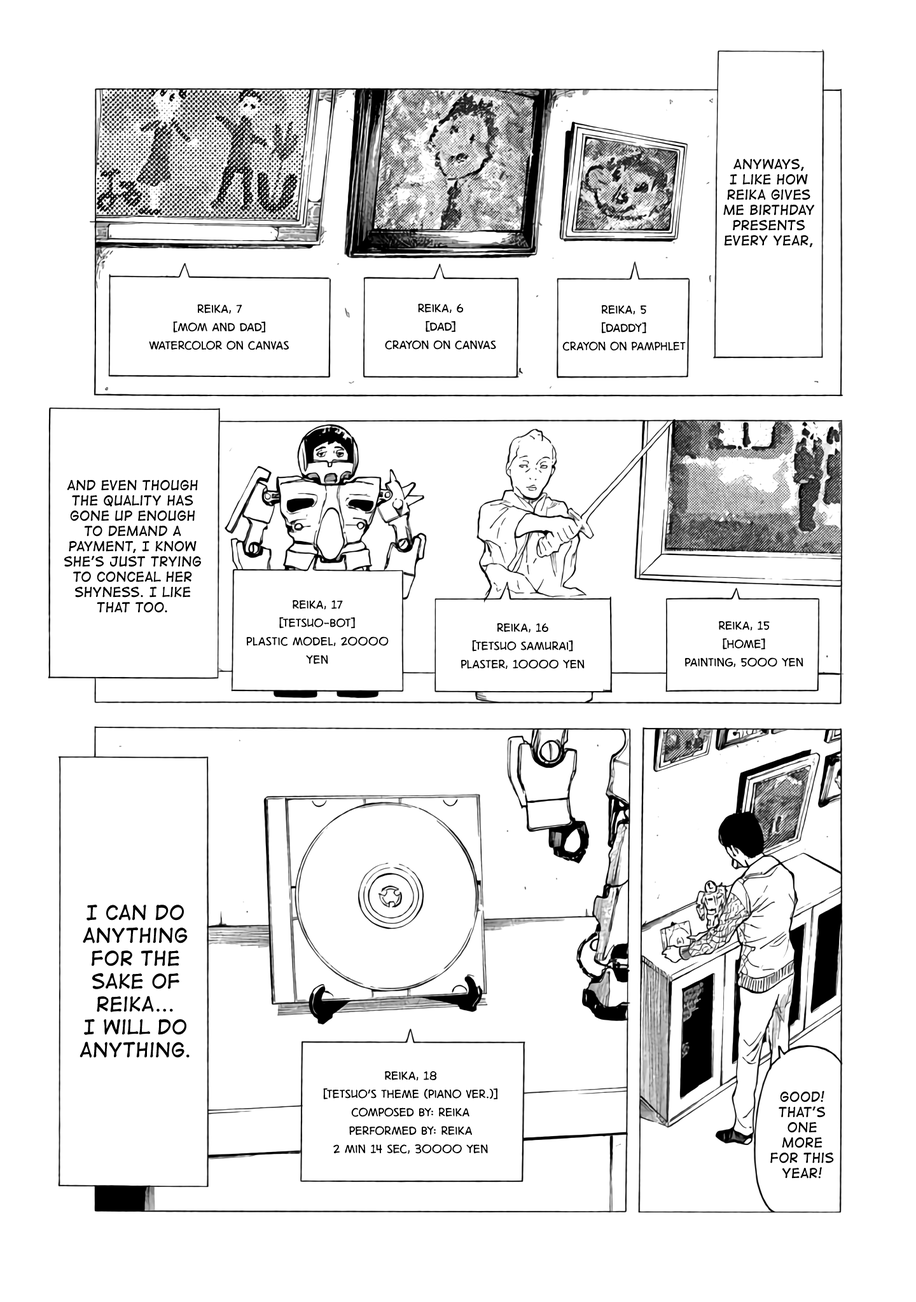
<style>
.page{position:relative;width:916px;height:1302px;background:#ffffff}
.page>*{position:absolute;margin:0}
.t1{font:12.7px "DigitalStrip";color:#000000}
.t2{font:15.3px "DigitalStrip.BB";color:#000000}
.t3{font:19.1px "DigitalStrip";color:#000000}
</style>
<div class="page">
<p class="t1" style="left:723px;top:159px;width:92px;height:88px;text-align:center">Anyways, I like how Reika gives me birthday presents every year,</p>
<p class="t2" style="left:149px;top:304px;width:140px;height:46px;text-align:center">Reika, 7<br>[Mom and Dad]<br>Watercolor on canvas</p>
<p class="t2" style="left:385px;top:303px;width:111px;height:47px;text-align:center">Reika, 6<br>[Dad]<br>Crayon on Canvas</p>
<p class="t2" style="left:562px;top:305px;width:123px;height:46px;text-align:center">Reika, 5<br>[Daddy]<br>Crayon on pamphlet</p>
<p class="t1" style="left:64px;top:480px;width:137px;height:133px;text-align:center">and even though the quality has gone up enough to demand a payment, I know she’s just trying to conceal her shyness. I like that too.</p>
<p class="t2" style="left:246px;top:600px;width:143px;height:64px;text-align:center">Reika, 17<br>[tetsuo-bot]<br>plastic Model, 20000 Yen</p>
<p class="t2" style="left:461px;top:623px;width:123px;height:47px;text-align:center">Reika, 16<br>[Tetsuo Samurai]<br>Plaster, 10000 Yen</p>
<p class="t2" style="left:685px;top:621px;width:118px;height:47px;text-align:center">Reika, 15<br>[Home]<br>Painting, 5000 Yen</p>
<p class="t3" style="left:79px;top:904px;width:110px;height:154px;text-align:center">I can do anything for the sake of reika... <br>I will do anything.</p>
<p class="t2" style="left:323px;top:1071px;width:175px;height:83px;text-align:center">Reika, 18<br>[Tetsuo’s Theme (Piano Ver.)]<br>Composed by: Reika<br>Performed by: Reika<br>2 min 14 sec, 30000 Yen</p>
<p class="t1" style="left:770px;top:1091px;width:64px;height:88px;text-align:center">Good! That’s one more for this year!</p>
</div>
